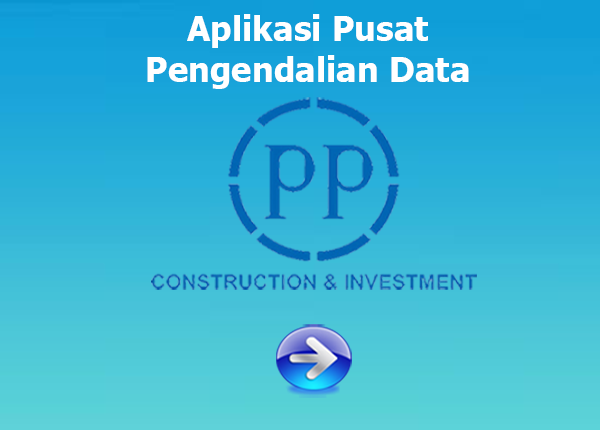
<style>
.page{position:relative;width:600px;height:430px}
.page>*{position:absolute;margin:0}
.t1{font:33.7px "Tahoma-Bold";color:#ffffff}
</style>
<div class="page">
<p class="t1" style="left:147px;top:14px;width:322px;height:75px;text-align:center">Aplikasi Pusat Pengendalian Data</p>
</div>
